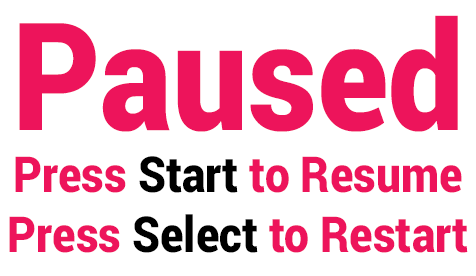
<style>
.page{position:relative;width:476px;height:276px;background:#ffffff}
.page>*{position:absolute;margin:0}
.t1{font:150px "Roboto-Black";color:#ed145b;scale:0.9 1}
.t2{font:49.4px "Roboto-Black";color:#ed145b;scale:0.9 1}
.t3{font:49.4px "Roboto-Black";color:#000000;scale:0.9 1}
</style>
<div class="page">
<p class="t1" style="left:19px;top:15px;width:439px;height:117px">Paused</p>
<p class="t2" style="left:9px;top:156px;width:459px;height:97px;text-align:center">Press <span class="t3">Start </span>to Resume<br>Press <span class="t3">Select </span>to Restart</p>
</div>
